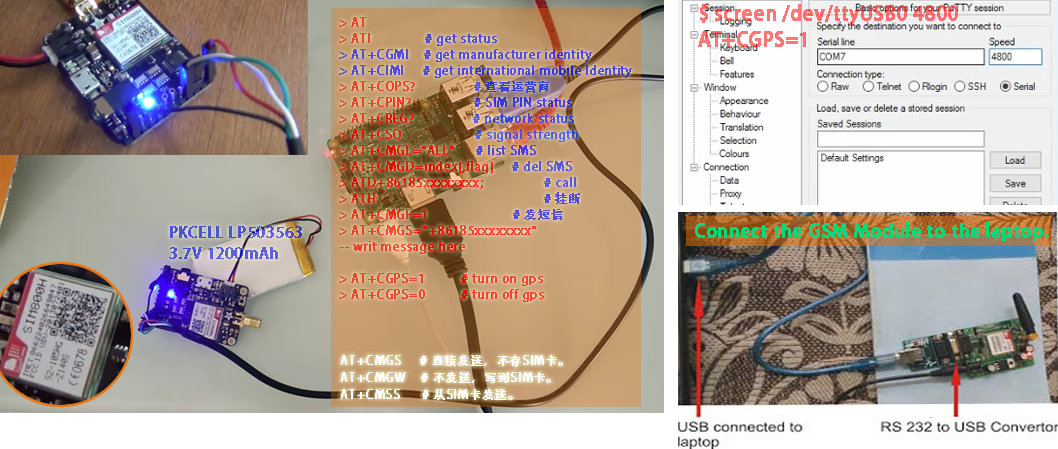
<style>
.page{position:relative;width:1058px;height:449px}
.page>*{position:absolute;margin:0}
.t1{font:19px/13px "AdobeHeitiStd-Regular";color:#fb7171;font-weight:bold}
.t2{font:12px/16px "AdobeHeitiStd-Regular";font-weight:bold}
.t3{font:18px "AdobeHeitiStd-Regular";color:#00dc7c;font-weight:bold}
.t4{font:15px/21px "AdobeHeitiStd-Regular";color:#4d57cf;font-weight:bold}
.t5{font:12px/17px "AdobeHeitiStd-Regular";color:#fefefe;font-weight:bold}
</style>
<div class="page">
<p class="t1" style="left:698px;top:4px;width:260px;height:43px">$ screen /dev/ttyUSB0 4800<br><br>AT+CGPS=1</p>
<p class="t2" style="left:339px;top:17px;width:293px;height:285px">&gt; AT<br>&gt; ATI       # get status<br>&gt; AT+CGMI    # get manufacturer identity  <br>&gt; AT+CIMI     # get international mobile Identity    <br>&gt; AT+COPS?                # 查看运营商<br>&gt; AT+CPIN?                 # SIM PIN status<br>&gt; AT+CREG?                # network status<br>&gt; AT+CSQ                    # signal strength<br>&gt; AT+CMGL="ALL"      # list SMS<br>&gt; AT+CMGD=index[,flag]     # del SMS<br>&gt; ATD+86185xxxxxxxx;        # call<br>&gt; ATH           # 挂断<br>&gt; AT+CMGF=1                       # 发短信<br>&gt; AT+CMGS="+86185xxxxxxxx"<br>-- writ message here<br><br>&gt; AT+CGPS=1      # turn on gps<br>&gt; AT+CGPS=0      # turn off gps</p>
<p class="t3" style="left:695px;top:222px;width:353px;height:20px">Connect the GSM Module to the laptop.</p>
<p class="t4" style="left:169px;top:226px;width:133px;height:33px">PKCELL LP503563<br>3.7V 1200mAh</p>
<p class="t5" style="left:340px;top:355px;width:223px;height:45px">AT+CMGS     # 直接发送，不存SIM卡。 <br>AT+CMGW    # 不发送，写到SIM卡。 <br>AT+CMSS      # 从SIM卡发送。</p>
</div>
